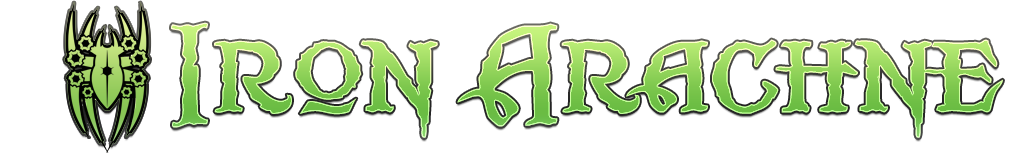
<style>
.page{position:relative;width:1024px;height:153px;background:#ffffff}
.page>*{position:absolute;margin:0}
.t1{font:150px "Scurlock"}
</style>
<div class="page">
<p class="t1" style="left:171px;top:22px;width:832px;height:116px">Iron Arachne</p>
</div>
